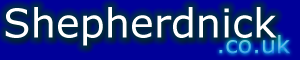
<style>
.page{position:relative;width:300px;height:60px;background:#000099}
.page>*{position:absolute;margin:0}
.t1{font:40px "Verdana";color:#ffffff}
.t2{font:24px "Verdana"}
</style>
<div class="page">
<p class="t1" style="left:5px;top:7px;width:272px;height:39px">Shepherdnick</p>
<p class="t2" style="left:219px;top:35px;width:71px;height:19px">.co.uk</p>
</div>
